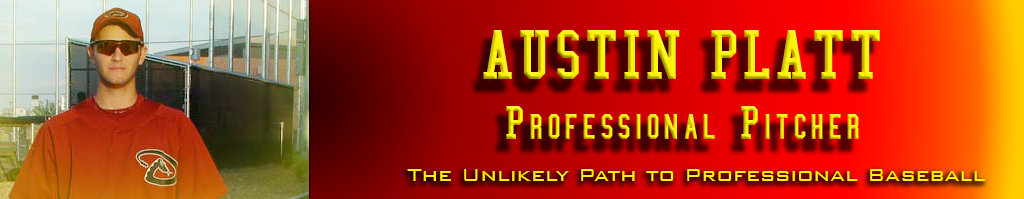
<style>
.page{position:relative;width:1024px;height:199px}
.page>*{position:absolute;margin:0}
.t1{font:72px/60px "CollegeCondensed";letter-spacing:0.025em}
.t2{font:48px/60px "CollegeCondensed";letter-spacing:0.075em}
.t3{font:36px/60px "CollegeCondensed";letter-spacing:0.1em}
.t4{font:48px/60px "CollegeCondensed";letter-spacing:0.1em}
.t5{font:24px "BankGothicBT-Light";color:#fff200}
</style>
<div class="page">
<p class="t1" style="left:483px;top:30px;width:397px;height:109px;text-align:center">AUSTIN PLATT<br><span class="t2">P</span><span class="t3">rofessional</span><span class="t4"> P</span><span class="t3">itcher</span></p>
<p class="t5" style="left:407px;top:169px;width:578px;height:12px">The Unlikely Path to Professional Baseball</p>
</div>
